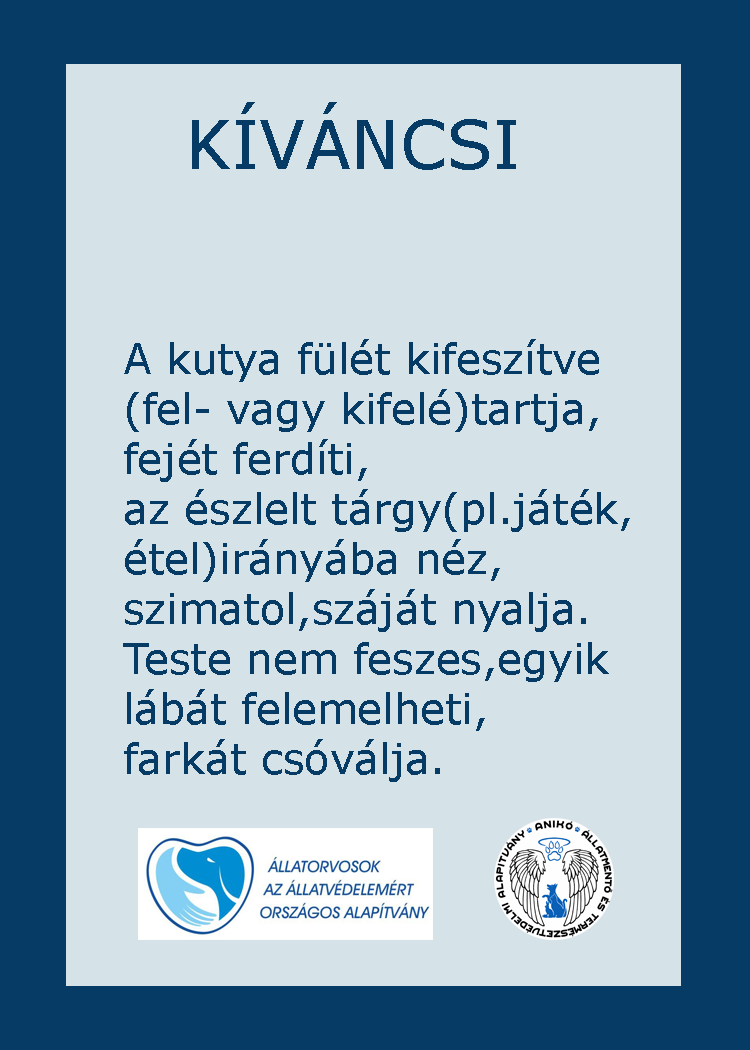
<style>
.page{position:relative;width:750px;height:1050px;background:#d5e2e7}
.page>*{position:absolute;margin:0}
.t1{font:66.7px "Verdana";color:#053b65}
.t2{font:66.7px "GravitateBRK";color:#053b65}
.t3{font:41.7px "Verdana";color:#053b65}
</style>
<div class="page">
<p class="t1" style="left:192px;top:102px;width:324px;height:68px"><span class="t2">        </span>KÍVÁNCSI</p>
<p class="t3" style="left:123px;top:339px;width:507px;height:443px">A kutya fülét kifeszítve <br>(fel- vagy kifelé)tartja,<br>fejét ferdíti,<br>az észlelt tárgy(pl.játék,<br>étel)irányába néz,<br>szimatol,száját nyalja.<br>Teste nem feszes,egyik <br>lábát felemelheti,<br>farkát csóválja.</p>
</div>
